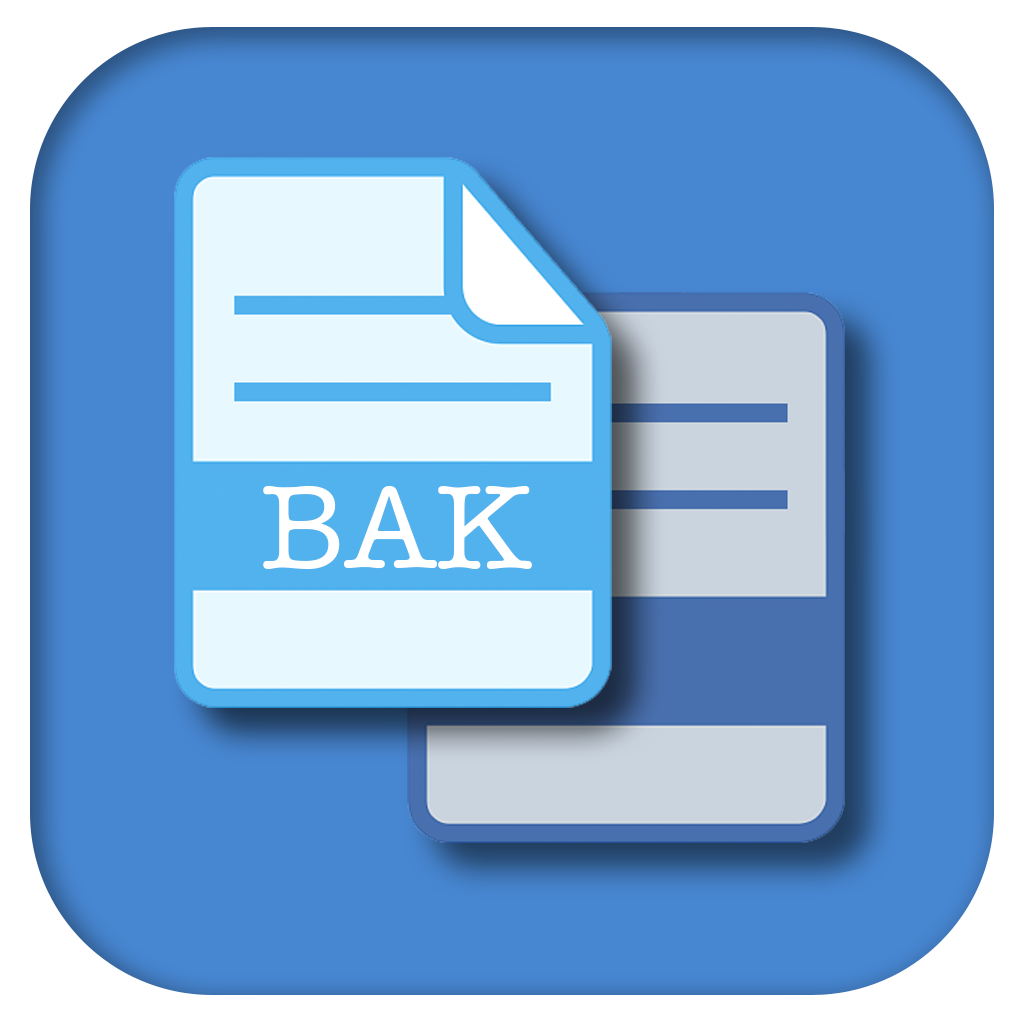
<style>
.page{position:relative;width:1024px;height:1024px;background:#4786d1}
.page>*{position:absolute;margin:0}
.t1{font:122px "AmericanTypewriter";color:#ffffff}
</style>
<div class="page">
<p class="t1" style="left:263px;top:486px;width:269px;height:83px">BAK</p>
</div>
